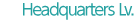
<style>
.page{position:relative;width:134px;height:20px;background:#ffffff}
.page>*{position:absolute;margin:0}
.t1{font:16px "UDShinGoPro-Regular";letter-spacing:-0.08em;color:#26a1a1}
</style>
<div class="page">
<p class="t1" style="left:23px;top:2px;width:111px;height:18px">Headquarters Lv.</p>
</div>
